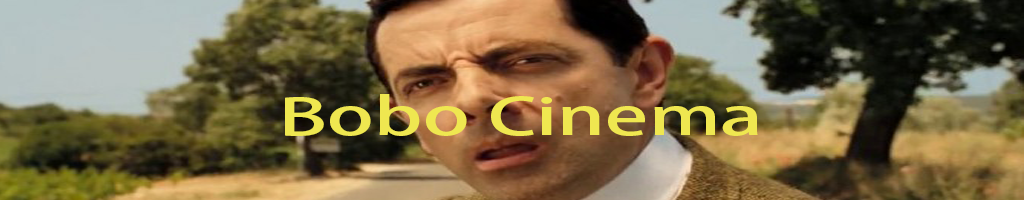
<style>
.page{position:relative;width:1024px;height:200px}
.page>*{position:absolute;margin:0}
.t1{font:12px "AdobeHeitiStd-Regular";color:#efe750;scale:1.59 1}
</style>
<div class="page">
<p class="t1" style="left:285px;top:94px;width:473px;height:42px">Bobo Cinema</p>
</div>
